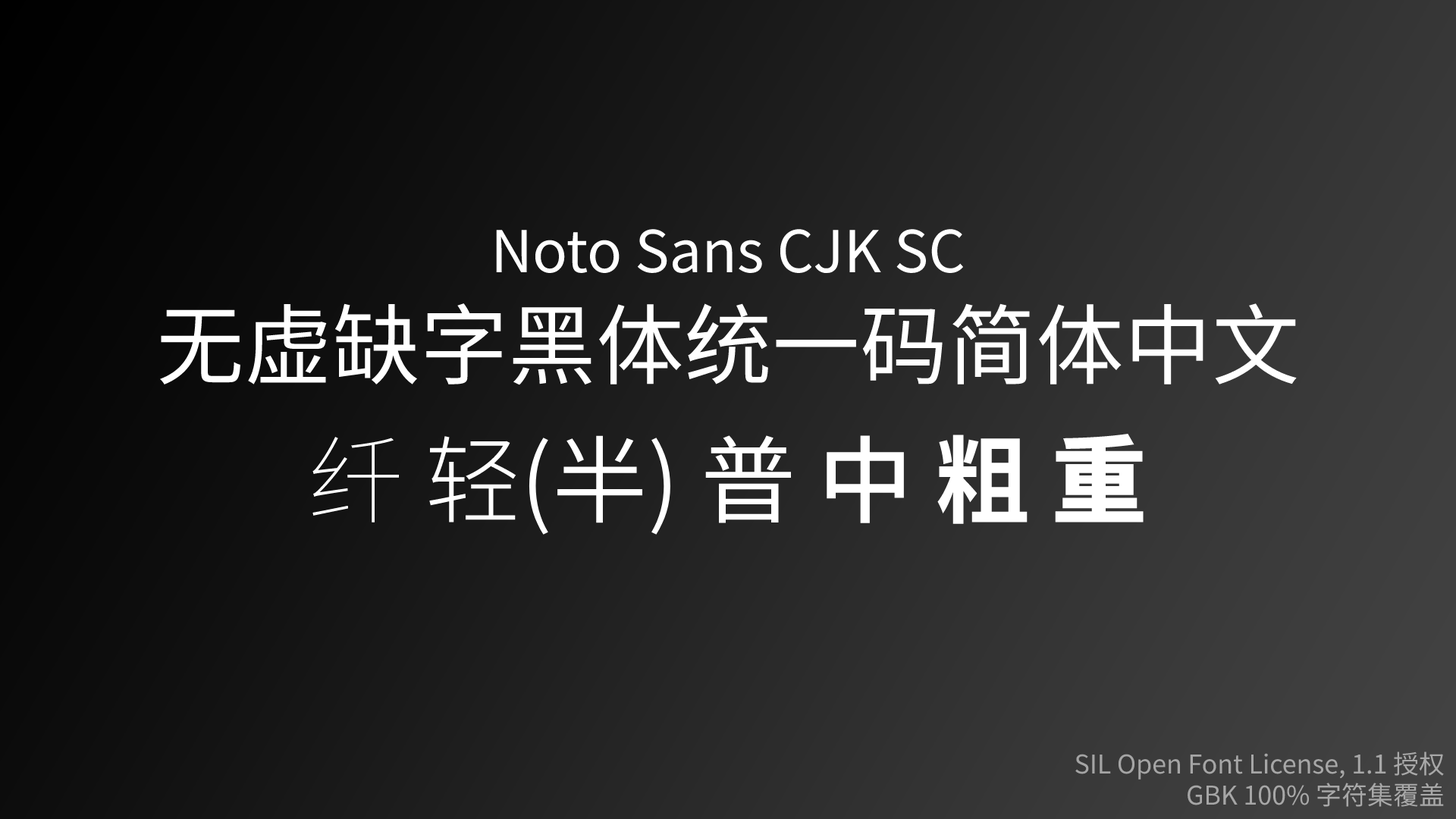
<style>
.page{position:relative;width:1456px;height:819px}
.page>*{position:absolute;margin:0}
.t1{font:57.6px "NotoSansCJKsc-Regular";color:#ffffff}
.t2{font:88px "NotoSansCJKsc-Regular";color:#ffffff}
.t3{font:95.5px "NotoSansCJKsc-DemiLight";color:#ffffff}
.t4{font:95.5px "NotoSansCJKsc-Thin";color:#ffffff}
.t5{font:95.5px "NotoSansCJKsc-Light";color:#ffffff}
.t6{font:95.5px "NotoSansCJKsc-Regular";color:#ffffff}
.t7{font:95.5px "NotoSansCJKsc-Medium";color:#ffffff}
.t8{font:95.5px "NotoSansCJKsc-Bold";color:#ffffff}
.t9{font:95.5px "NotoSansCJKsc-Black";color:#ffffff}
.t10{font:25.8px "NotoSansCJKsc-Regular";color:#a7a7a7}
</style>
<div class="page">
<p class="t1" style="left:159px;top:229px;width:1138px;height:156px;text-align:center">Noto Sans CJK SC<br><span class="t2">无虚缺字黑体统一码简体中文</span></p>
<p class="t3" style="left:312px;top:434px;width:832px;height:101px"><span class="t4">纤 </span><span class="t5">轻</span>(半) <span class="t6">普 </span><span class="t7">中 </span><span class="t8">粗 </span><span class="t9">重</span></p>
<p class="t10" style="left:1075px;top:751px;width:369px;height:56px;text-align:right">SIL Open Font License, 1.1 授权<br> GBK 100% 字符集覆盖</p>
</div>
